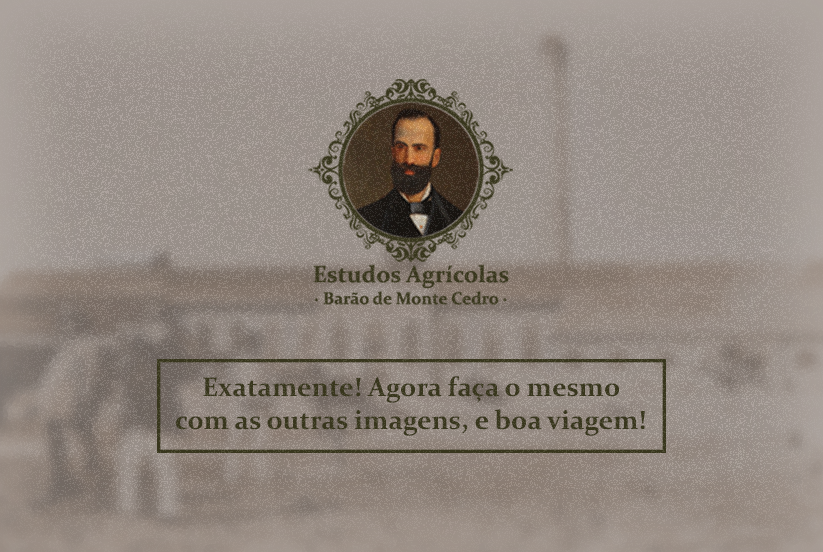
<style>
.page{position:relative;width:823px;height:552px}
.page>*{position:absolute;margin:0}
.t1{font:27px "Constantia-Bold";color:#3a381d}
</style>
<div class="page">
<p class="t1" style="left:176px;top:376px;width:469px;height:60px;text-align:center">Exatamente! Agora faça o mesmo<br>com as outras imagens, e boa viagem!</p>
</div>
